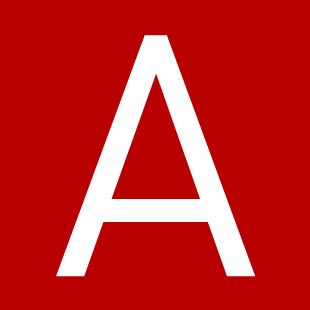
<style>
.page{position:relative;width:310px;height:310px;background:#b80000}
.page>*{position:absolute;margin:0}
.t1{font:337.5px "DINPro-Regular";color:#ffffff;font-weight:bold}
</style>
<div class="page">
<p class="t1" style="left:56px;top:35px;width:199px;height:242px">A</p>
</div>
